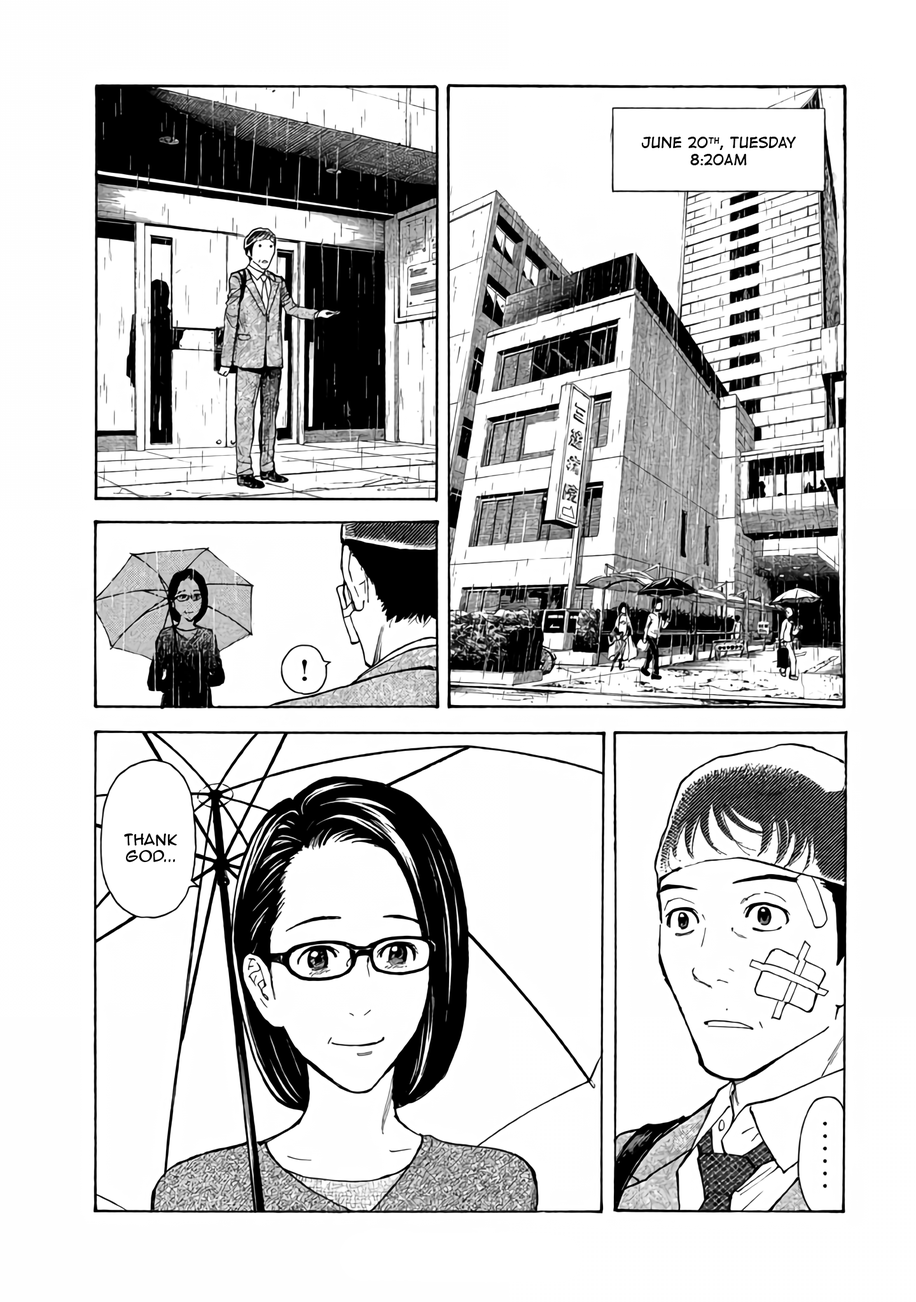
<style>
.page{position:relative;width:916px;height:1302px;background:#ffffff}
.page>*{position:absolute;margin:0}
.t1{font:14px "DigitalStrip";color:#000000}
.t2{font:14px "AnimeAce2.0BB";color:#000000}
</style>
<div class="page">
<p class="t1" style="left:641px;top:137px;width:154px;height:28px;text-align:center">June 20th, Tuesday<br>8:20AM</p>
<p class="t2" style="left:124px;top:834px;width:53px;height:28px;text-align:center">Thank god...</p>
</div>
